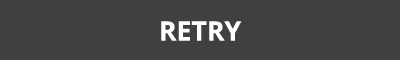
<style>
.page{position:relative;width:400px;height:60px;background:#404040}
.page>*{position:absolute;margin:0}
.t1{font:26.7px "OpenSans-Bold";color:#ffffff}
</style>
<div class="page">
<p class="t1" style="left:161px;top:21px;width:81px;height:20px">RETRY</p>
</div>
